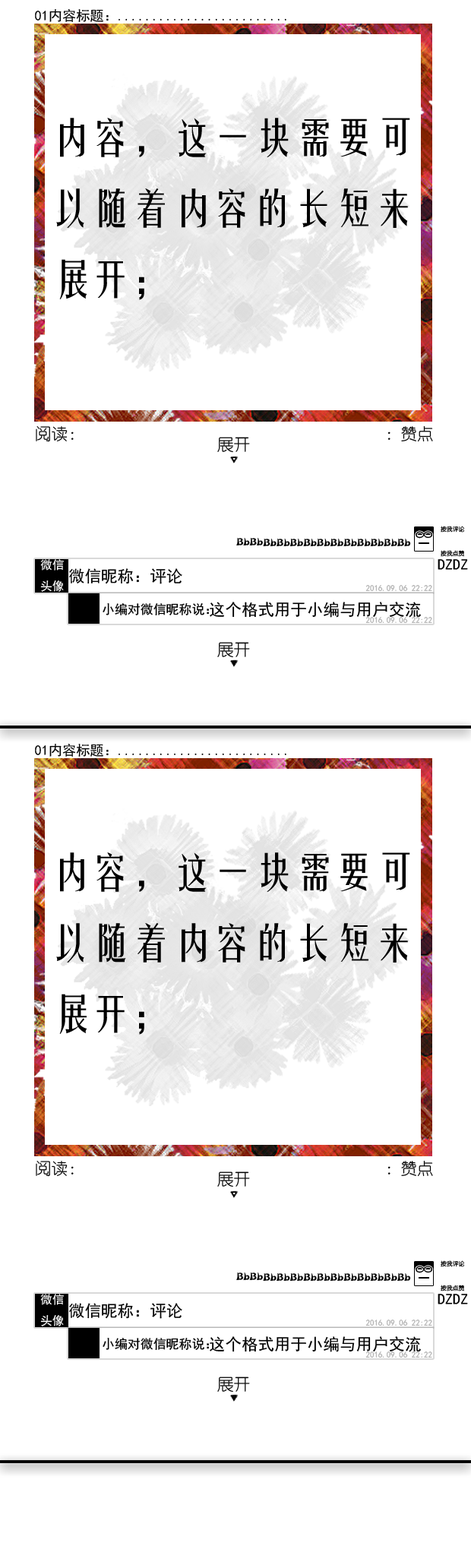
<style>
.page{position:relative;width:471px;height:1568px;background:#ffffff}
.page>*{position:absolute;margin:0}
.t1{font:13.8px "SimHei";color:#000000}
.t2{font:40.5px "FZYTK--GBK1-0";color:#000000}
.t3{font:16.3px "YouYuan";color:#010101}
.t4{font:21.5px "SimSun";color:#000000}
.t5{font:6px "YouYuan";color:#000000}
.t6{font:11.2px "HYk5gj";color:#010101}
.t7{font:11.9px "SimHei";color:#ffffff}
.t8{font:16.3px "SimHei";color:#010101}
.t9{font:15.3px "SimHei";color:#010101}
.t10{font:8.3px "SimHei";color:#b2b2b2}
.t11{font:12.9px "SimHei";color:#000000}
.t12{font:16.3px "SimHei";color:#000000}
</style>
<div class="page">
<p class="t1" style="left:35px;top:9px;width:251px;height:13px">01内容标题：.........................</p>
<p class="t2" style="left:56px;top:118px;width:354px;height:182px">内容，这一块需要可<br>以随着内容的长短来<br>展开；</p>
<p class="t3" style="left:387px;top:425px;width:46px;height:17px">：赞点</p>
<p class="t3" style="left:36px;top:426px;width:38px;height:16px">阅读：</p>
<p class="t3" style="left:217px;top:437px;width:33px;height:16px">展开</p>
<p class="t4" style="left:416px;top:531px;width:17px;height:8px">∞</p>
<p class="t5" style="left:441px;top:526px;width:24px;height:7px">按我评论</p>
<p class="t6" style="left:236px;top:538px;width:175px;height:8px">BbBbBbBbBbBbBbBbBbBbBbBbBb</p>
<p class="t5" style="left:441px;top:550px;width:24px;height:7px">按我点赞</p>
<p class="t7" style="left:40px;top:559px;width:24px;height:33px">微信<br>头像</p>
<p class="t8" style="left:69px;top:568px;width:113px;height:16px">微信昵称：评论</p>
<p class="t9" style="left:438px;top:559px;width:30px;height:11px">DZDZ</p>
<p class="t10" style="left:365px;top:585px;width:67px;height:6px">2016.09.06 22:22</p>
<p class="t11" style="left:103px;top:603px;width:106px;height:12px">小编对微信昵称说：</p>
<p class="t12" style="left:210px;top:602px;width:211px;height:16px">这个格式用于小编与用户交流</p>
<p class="t10" style="left:365px;top:617px;width:67px;height:6px">2016.09.06 22:22</p>
<p class="t3" style="left:217px;top:642px;width:33px;height:16px">展开</p>
<p class="t1" style="left:35px;top:744px;width:251px;height:13px">01内容标题：.........................</p>
<p class="t2" style="left:56px;top:852px;width:354px;height:183px">内容，这一块需要可<br>以随着内容的长短来<br>展开；</p>
<p class="t3" style="left:36px;top:1161px;width:38px;height:16px">阅读：</p>
<p class="t3" style="left:387px;top:1160px;width:46px;height:17px">：赞点</p>
<p class="t3" style="left:217px;top:1171px;width:33px;height:16px">展开</p>
<p class="t4" style="left:416px;top:1266px;width:17px;height:7px">∞</p>
<p class="t5" style="left:441px;top:1260px;width:24px;height:7px">按我评论</p>
<p class="t6" style="left:236px;top:1272px;width:175px;height:9px">BbBbBbBbBbBbBbBbBbBbBbBbBb</p>
<p class="t5" style="left:441px;top:1285px;width:24px;height:6px">按我点赞</p>
<p class="t7" style="left:40px;top:1294px;width:24px;height:32px">微信<br>头像</p>
<p class="t9" style="left:438px;top:1294px;width:30px;height:10px">DZDZ</p>
<p class="t8" style="left:69px;top:1303px;width:113px;height:16px">微信昵称：评论</p>
<p class="t10" style="left:365px;top:1320px;width:67px;height:6px">2016.09.06 22:22</p>
<p class="t11" style="left:103px;top:1338px;width:106px;height:12px">小编对微信昵称说：</p>
<p class="t12" style="left:210px;top:1336px;width:211px;height:16px">这个格式用于小编与用户交流</p>
<p class="t10" style="left:365px;top:1351px;width:67px;height:7px">2016.09.06 22:22</p>
<p class="t3" style="left:217px;top:1377px;width:33px;height:16px">展开</p>
</div>
